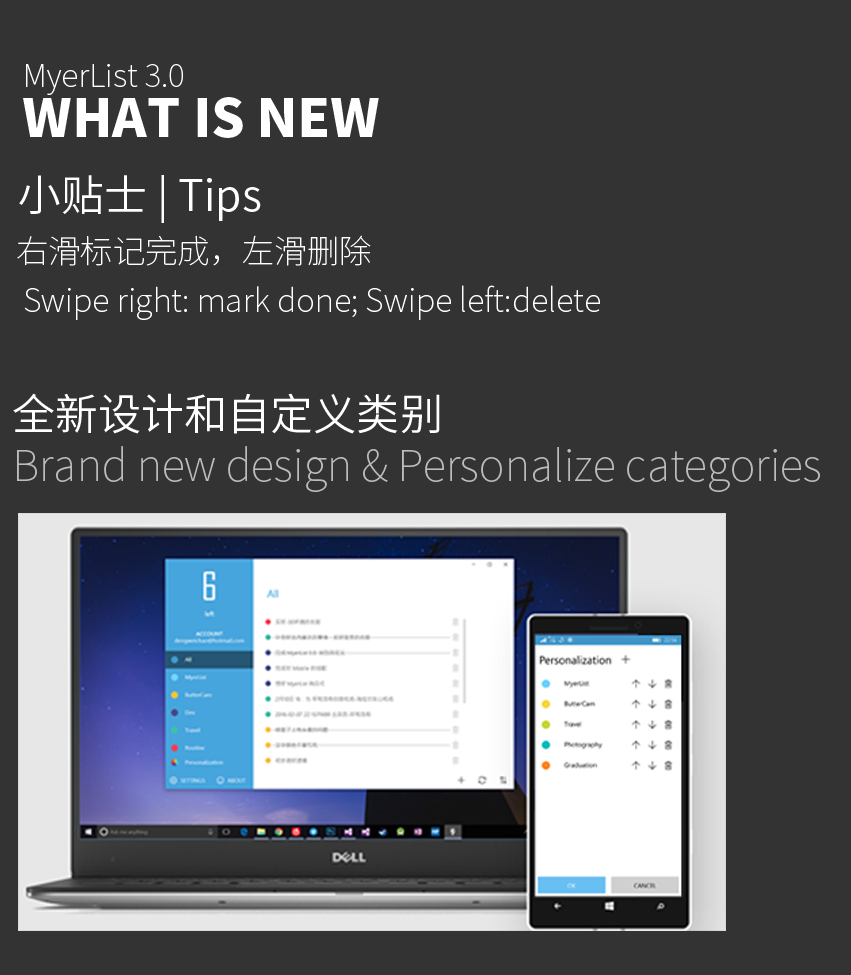
<style>
.page{position:relative;width:851px;height:975px;background:#333333}
.page>*{position:absolute;margin:0}
.t1{font:31.7px "SourceHanSansCN-ExtraLight";color:#ffffff}
.t2{font:52.6px "SourceHanSansCN-Heavy";color:#ffffff}
.t3{font:43.1px "SourceHanSansCN-Normal";color:#ffffff}
.t4{font:32.3px "SourceHanSansCN-ExtraLight";color:#ffffff}
.t5{font:43.1px "SourceHanSansCN-ExtraLight";color:#bcbcbc}
</style>
<div class="page">
<p class="t1" style="left:26px;top:64px;width:157px;height:31px">MyerList 3.0</p>
<p class="t2" style="left:23px;top:97px;width:356px;height:41px">WHAT IS NEW</p>
<p class="t3" style="left:19px;top:175px;width:242px;height:48px">小贴士 | Tips</p>
<p class="t4" style="left:17px;top:235px;width:354px;height:31px">右滑标记完成，左滑删除</p>
<p class="t4" style="left:24px;top:285px;width:576px;height:35px">Swipe right: mark done; Swipe left:delete</p>
<p class="t3" style="left:13px;top:393px;width:427px;height:41px">全新设计和自定义类别</p>
<p class="t5" style="left:17px;top:446px;width:803px;height:46px">Brand new design &amp; Personalize categories</p>
</div>
